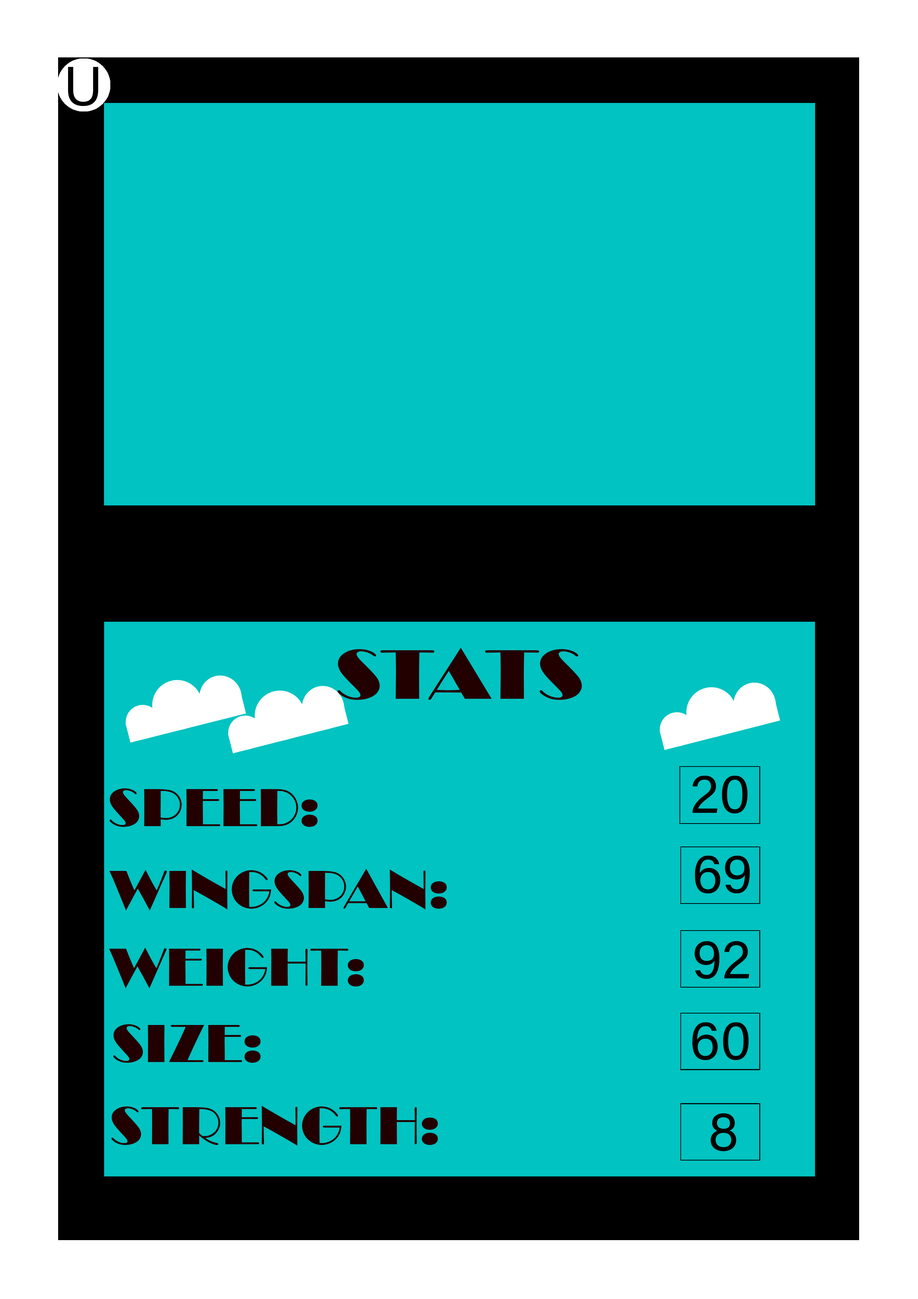
<style>
.page{position:relative;width:918px;height:1299px;background:#01c3c1}
.page>*{position:absolute;margin:0}
.t1{font:55.5px "AcuminConcept-Regular";color:#000000}
.t2{font:72.4px "Broadway";color:#230000;scale:1.09 1}
.t3{font:55.5px "Broadway";color:#230000}
</style>
<div class="page">
<p class="t1" style="left:68px;top:67px;width:30px;height:39px">U</p>
<p class="t2" style="left:338px;top:648px;width:244px;height:52px">STATS</p>
<p class="t1" style="left:692px;top:775px;width:56px;height:38px">20</p>
<p class="t3" style="left:110px;top:788px;width:208px;height:39px">SPEED:</p>
<p class="t1" style="left:695px;top:855px;width:55px;height:38px">69</p>
<p class="t3" style="left:109px;top:869px;width:338px;height:41px">WINGSPAN:</p>
<p class="t1" style="left:695px;top:941px;width:55px;height:38px">92</p>
<p class="t3" style="left:109px;top:947px;width:255px;height:41px">WEIGHT:</p>
<p class="t3" style="left:113px;top:1024px;width:148px;height:39px">SIZE:</p>
<p class="t1" style="left:692px;top:1022px;width:57px;height:38px">60</p>
<p class="t3" style="left:111px;top:1105px;width:327px;height:40px">STRENGTH:</p>
<p class="t1" style="left:710px;top:1113px;width:26px;height:38px">8</p>
</div>
